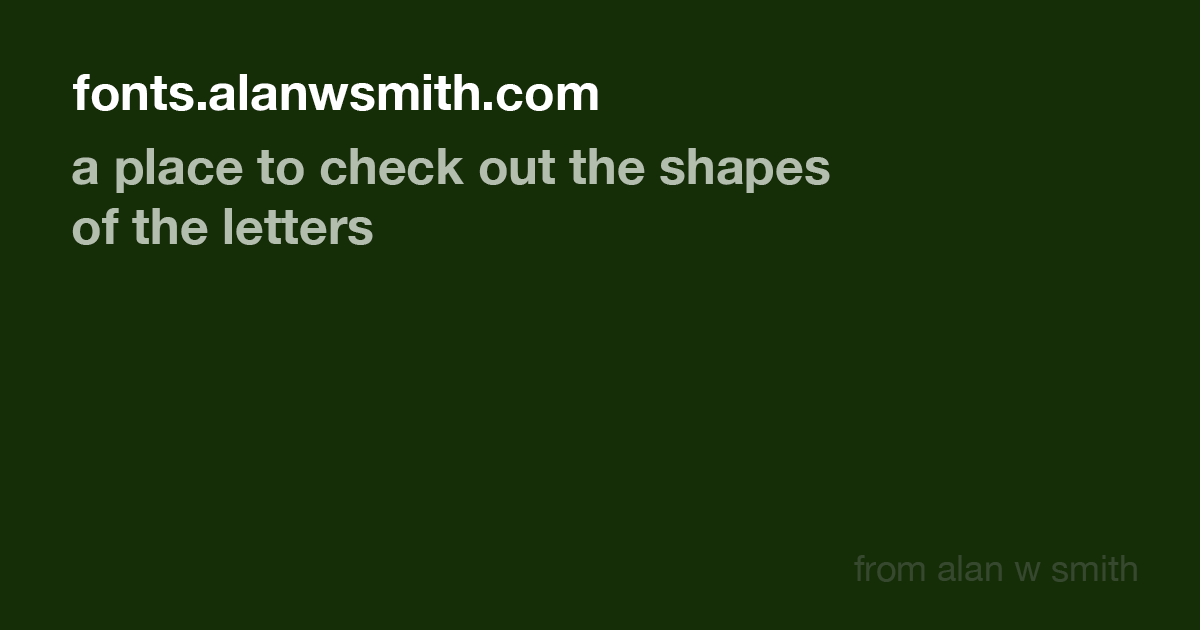
<style>
.page{position:relative;width:1200px;height:630px;background:#162e08}
.page>*{position:absolute;margin:0}
.t1{font:50px "HelveticaNeue-Bold";color:#ffffff}
.t2{font:50px "HelveticaNeue-Bold";color:#b4beae}
.t3{font:36px "HelveticaNeue";color:#36482e}
</style>
<div class="page">
<p class="t1" style="left:73px;top:74px;width:525px;height:37px">fonts.alanwsmith.com</p>
<p class="t2" style="left:72px;top:148px;width:758px;height:97px">a place to check out the shapes<br>of the letters</p>
<p class="t3" style="left:854px;top:555px;width:283px;height:27px">from alan w smith</p>
</div>
